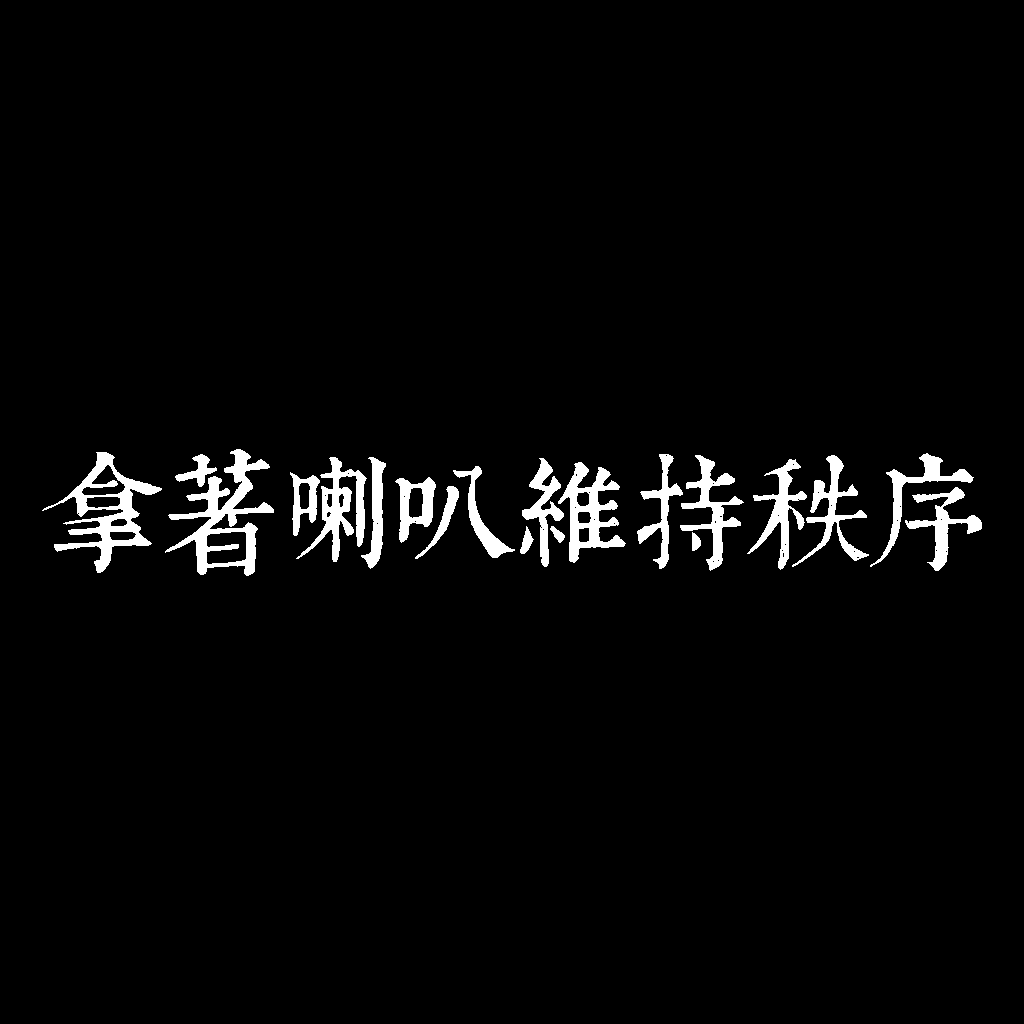
<style>
.page{position:relative;width:1024px;height:1024px;background:#000000}
.page>*{position:absolute;margin:0}
.t1{font:120px "TpldKhangXiDictTrial";letter-spacing:-0.02em;color:#ffffff}
</style>
<div class="page">
<p class="t1" style="left:42px;top:449px;width:940px;height:127px">拿著喇叭維持秩序</p>
</div>
